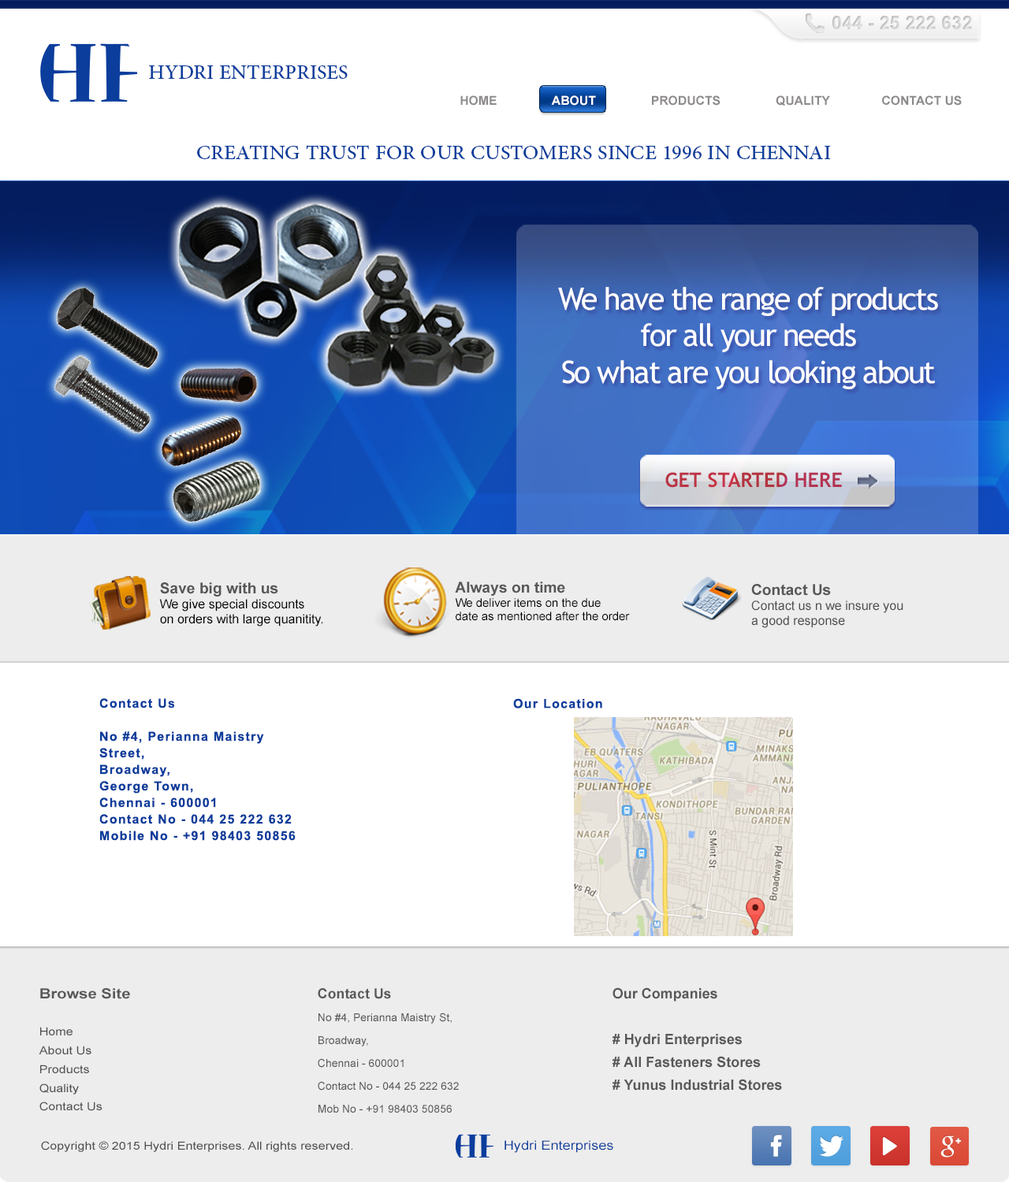
<style>
.page{position:relative;width:1009px;height:1182px;background:#ffffff}
.page>*{position:absolute;margin:0}
.t1{font:18.7px "Arial-BoldMT";color:#c0c0c0;text-transform:uppercase}
.t2{font:28.3px "AdobeArabic-Regular";color:#0c3e9c;text-transform:uppercase}
.t3{font:12.5px "Arial-BoldMT";color:#8d8a8a;text-transform:uppercase}
.t4{font:12.5px "Arial-BoldMT";color:#ffffff;text-transform:uppercase}
.t5{font:28.4px "AdobeArabic-Regular";color:#0c3e9c;text-transform:uppercase}
.t6{font:30.8px "TrebuchetMS";letter-spacing:-0.05em;color:#ffffff}
.t7{font:20px "TrebuchetMS-Bold";color:#b53343;text-transform:uppercase}
.t8{font:11.8px "ArialMT";color:#000000}
.t9{font:15.1px "Arial-BoldMT";color:#575757}
.t10{font:12.6px "ArialMT";color:#000000}
.t11{font:12.6px "ArialMT";color:#4f4f4f}
.t12{font:12.6px/16.5px "Arial-BoldMT";letter-spacing:0.08em;color:#0b3d9c}
.t13{font:12.6px "Arial-BoldMT";letter-spacing:0.08em;color:#0b3d9c}
.t14{font:11.2px/18.7px "ArialMT";color:#4f4f4f;scale:1.14 1}
.t15{font:14px/18.7px "Arial-BoldMT";color:#585858;scale:1.14 1}
.t16{font:11px/22.9px "ArialMT";color:#585858}
.t17{font:14px/22.9px "Arial-BoldMT";color:#585858}
.t18{font:14.2px/22.9px "Arial-BoldMT";color:#585858}
.t19{font:11.2px "ArialMT";color:#4f4f4f;scale:1.14 1}
.t20{font:12.6px "ArialMT";color:#0c3e9c;scale:1.14 1}
</style>
<div class="page">
<p class="t1" style="left:832px;top:16px;width:140px;height:14px">044 - 25 222 632</p>
<p class="t2" style="left:148px;top:65px;width:200px;height:14px">Hydri enterprises</p>
<p class="t3" style="left:460px;top:95px;width:501px;height:11px">Home                <span class="t4">About  </span>              Products                Quality               Contact US</p>
<p class="t5" style="left:197px;top:145px;width:634px;height:14px">CREATING tRUST fOR OUR cUSTOMERS SINCE 1996 IN cHENNAI</p>
<p class="t6" style="left:558px;top:287px;width:380px;height:102px;text-align:center">We have the range of products<br>for all your needs<br>So what are you looking about</p>
<p class="t7" style="left:665px;top:472px;width:177px;height:16px">get started here</p>
<p class="t8" style="left:455px;top:582px;width:175px;height:39px"><span class="t9">Always on time<br></span>We deliver items on the due <br>date as mentioned after the order</p>
<p class="t10" style="left:159px;top:582px;width:164px;height:45px"><span class="t9">Save big with us<br></span>We give special discounts<br>on orders with large quanitity.</p>
<p class="t11" style="left:751px;top:584px;width:152px;height:44px"><span class="t9">Contact Us<br></span>Contact us n we insure you<br>a good response</p>
<p class="t12" style="left:99px;top:698px;width:197px;height:143px">Contact Us<br><br>No #4, Perianna Maistry Street,<br>Broadway,<br>George Town,<br>Chennai - 600001<br>Contact No - 044 25 222 632<br>Mobile No - +91 98403 50856</p>
<p class="t13" style="left:513px;top:698px;width:89px;height:10px">Our Location</p>
<p class="t14" style="left:39px;top:988px;width:91px;height:123px"><span class="t15">Browse Site<br><br></span>Home<br>About Us<br>Products<br>Quality<br>Contact Us</p>
<p class="t16" style="left:318px;top:988px;width:141px;height:125px"><span class="t17">Contact Us<br></span>No #4, Perianna Maistry St,<br>Broadway,<br>Chennai - 600001<br>Contact No - 044 25 222 632<br>Mob No - +91 98403 50856</p>
<p class="t18" style="left:612px;top:987px;width:170px;height:104px">Our Companies<br><br># Hydri Enterprises<br># All Fasteners Stores<br># Yunus Industrial Stores</p>
<p class="t19" style="left:41px;top:1141px;width:312px;height:11px">Copyright © 2015 Hydri Enterprises. All rights reserved.</p>
<p class="t20" style="left:504px;top:1140px;width:109px;height:13px">Hydri Enterprises</p>
</div>
